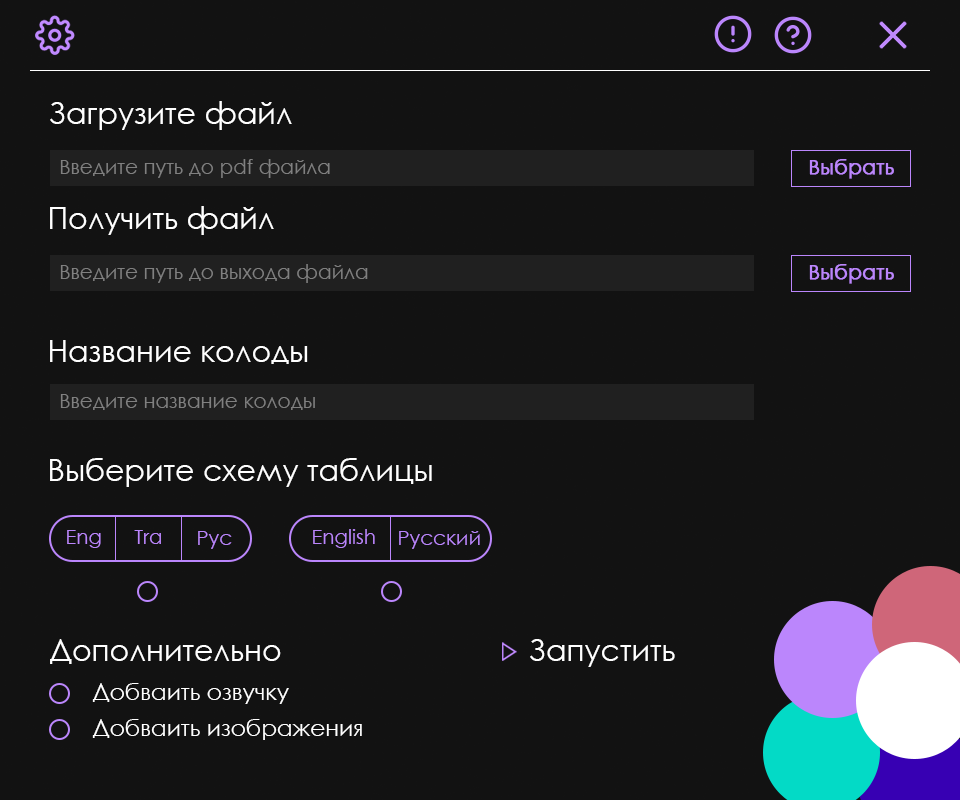
<style>
.page{position:relative;width:960px;height:800px;background:#121212}
.page>*{position:absolute;margin:0}
.t1{font:30px "CenturyGothic";color:#ffffff}
.t2{font:20px "CenturyGothic";color:#808080}
.t3{font:20px "CenturyGothic";color:#bb86fc;font-weight:bold}
.t4{font:20px "CenturyGothic";color:#bb86fc}
.t5{font:23px "CenturyGothic";color:#ffffff}
</style>
<div class="page">
<p class="t1" style="left:50px;top:101px;width:242px;height:29px">Загрузите файл</p>
<p class="t2" style="left:60px;top:159px;width:270px;height:19px">Введите путь до pdf файла</p>
<p class="t3" style="left:809px;top:159px;width:85px;height:20px">Выбрать</p>
<p class="t1" style="left:50px;top:206px;width:224px;height:29px">Получить файл</p>
<p class="t2" style="left:60px;top:264px;width:308px;height:19px">Введите путь до выхода файла</p>
<p class="t3" style="left:809px;top:264px;width:85px;height:20px">Выбрать</p>
<p class="t1" style="left:50px;top:340px;width:258px;height:24px">Название колоды</p>
<p class="t2" style="left:60px;top:394px;width:255px;height:16px">Введите название колоды</p>
<p class="t1" style="left:50px;top:458px;width:382px;height:29px">Выберите схему таблицы</p>
<p class="t4" style="left:67px;top:530px;width:34px;height:18px">Eng</p>
<p class="t4" style="left:134px;top:530px;width:27px;height:14px">Tra</p>
<p class="t4" style="left:198px;top:531px;width:34px;height:18px">Рус</p>
<p class="t4" style="left:313px;top:529px;width:62px;height:19px">English</p>
<p class="t4" style="left:399px;top:531px;width:81px;height:18px">Русский</p>
<p class="t1" style="left:50px;top:639px;width:231px;height:25px">Дополнительно</p>
<p class="t1" style="left:530px;top:639px;width:145px;height:28px">Запустить</p>
<p class="t5" style="left:92px;top:683px;width:197px;height:21px">Добваить озвучку</p>
<p class="t5" style="left:92px;top:719px;width:270px;height:21px">Добваить изображения</p>
</div>
